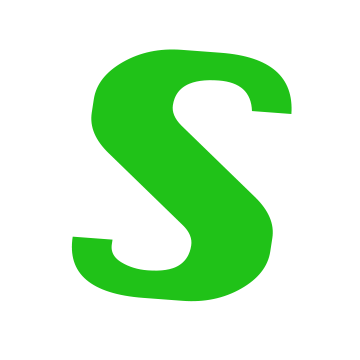
<style>
.page{position:relative;width:360px;height:360px;background:#ffffff}
.page>*{position:absolute;margin:0}
.t1{font:334.4px "Silom";color:#20c218;scale:1.42 1}
</style>
<div class="page">
<p class="t1" style="left:71px;top:49px;width:221px;height:253px;rotate:4deg">S</p>
</div>
